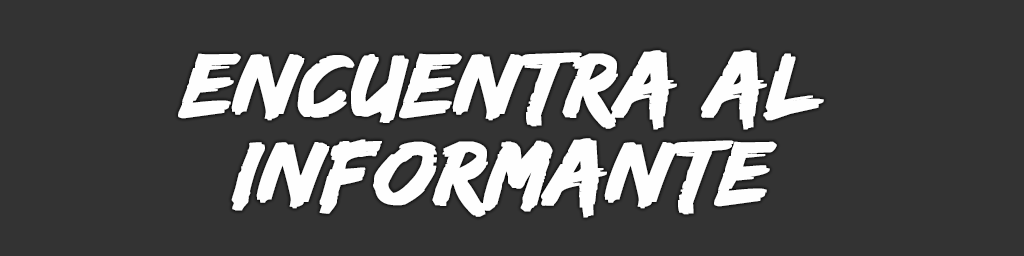
<style>
.page{position:relative;width:1024px;height:256px;background:#333333}
.page>*{position:absolute;margin:0}
.t1{font:94px/88px "EdoSZ";color:#fefefe;font-weight:bold;font-style:italic;scale:1.04 1}
</style>
<div class="page">
<p class="t1" style="left:178px;top:50px;width:646px;height:168px;text-align:center">encuentra al<br>informante</p>
</div>
